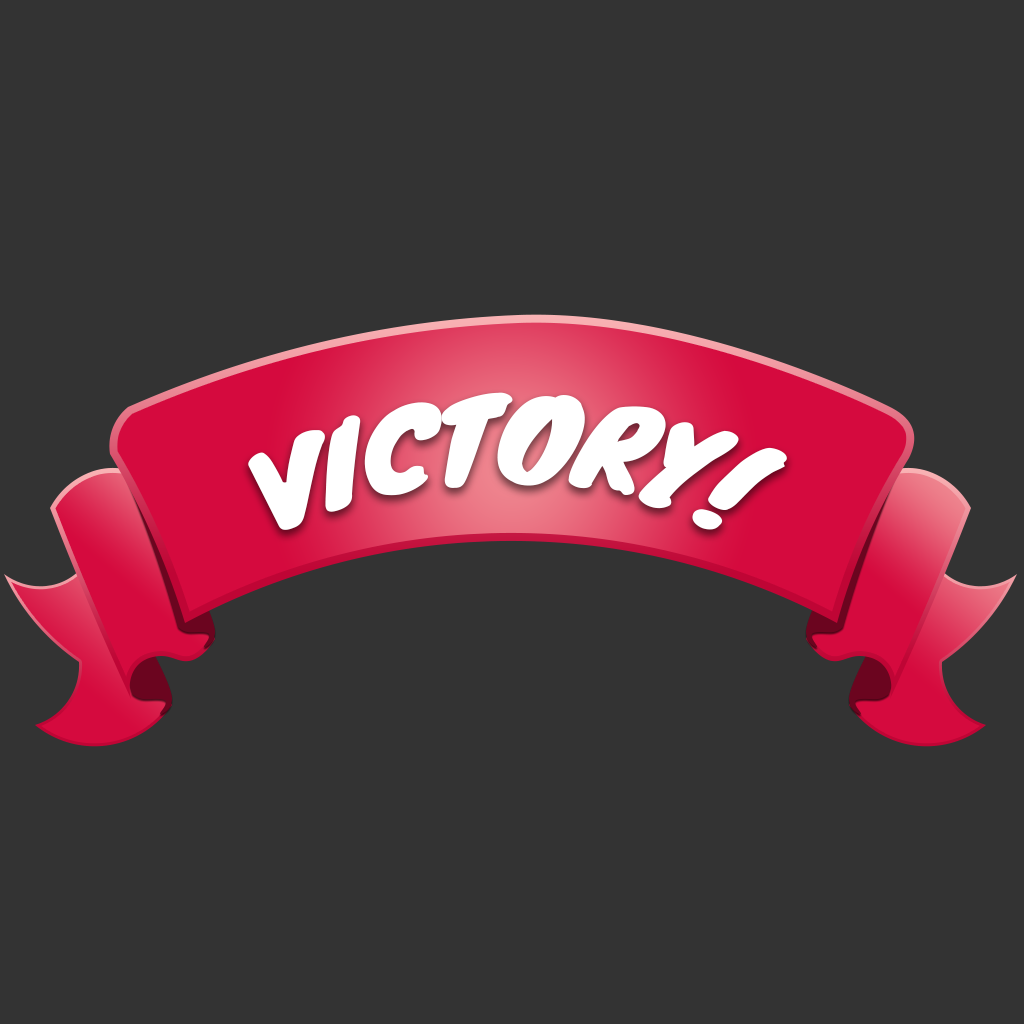
<style>
.page{position:relative;width:1024px;height:1024px;background:#333333}
.page>*{position:absolute;margin:0}
.t1{font:106.2px "Knewave-Regular";color:#ffffff}
</style>
<div class="page">
<p class="t1" style="left:248px;top:392px;width:539px;height:138px">VICTORY!</p>
</div>
